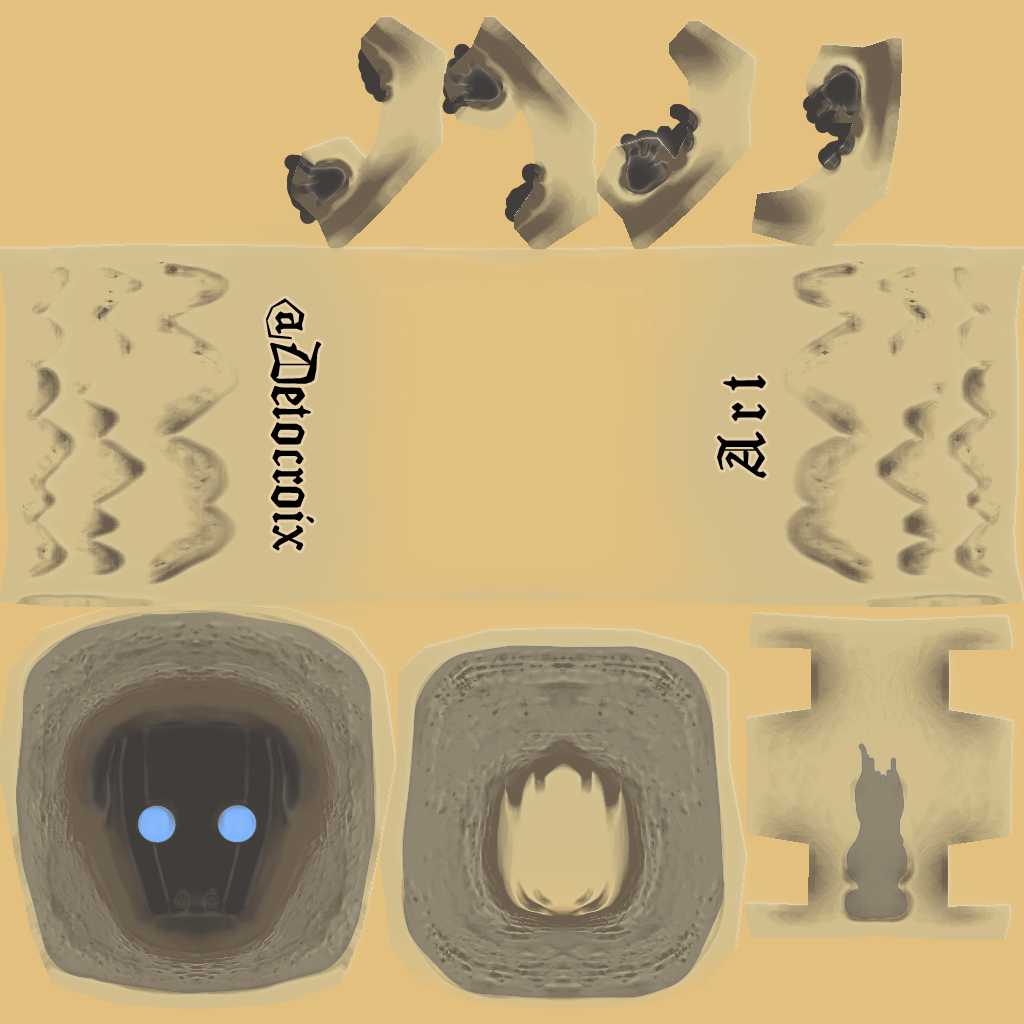
<style>
.page{position:relative;width:1024px;height:1024px;background:#e3c07e}
.page>*{position:absolute;margin:0}
.t1{font:65px "MonAmourFraktur-Broken";letter-spacing:-0.04em;color:#000000}
.t2{font:72px "MonAmourFraktur-Broken";letter-spacing:0.1em;color:#000000}
</style>
<div class="page">
<p class="t1" style="left:266px;top:298px;width:56px;height:253px;rotate:90deg">@Detocroix</p>
<p class="t2" style="left:716px;top:375px;width:51px;height:103px;rotate:-90deg">Art</p>
</div>
